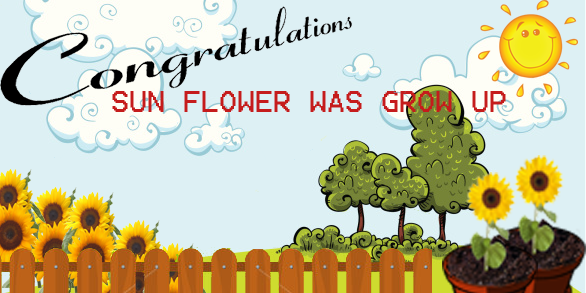
<style>
.page{position:relative;width:586px;height:293px;background:#ddf0f4}
.page>*{position:absolute;margin:0}
.t1{font:24px "Terminal";color:#c51c1c}
</style>
<div class="page">
<p class="t1" style="left:112px;top:91px;width:394px;height:21px">SUN FLOWER WAS GROW UP</p>
</div>
